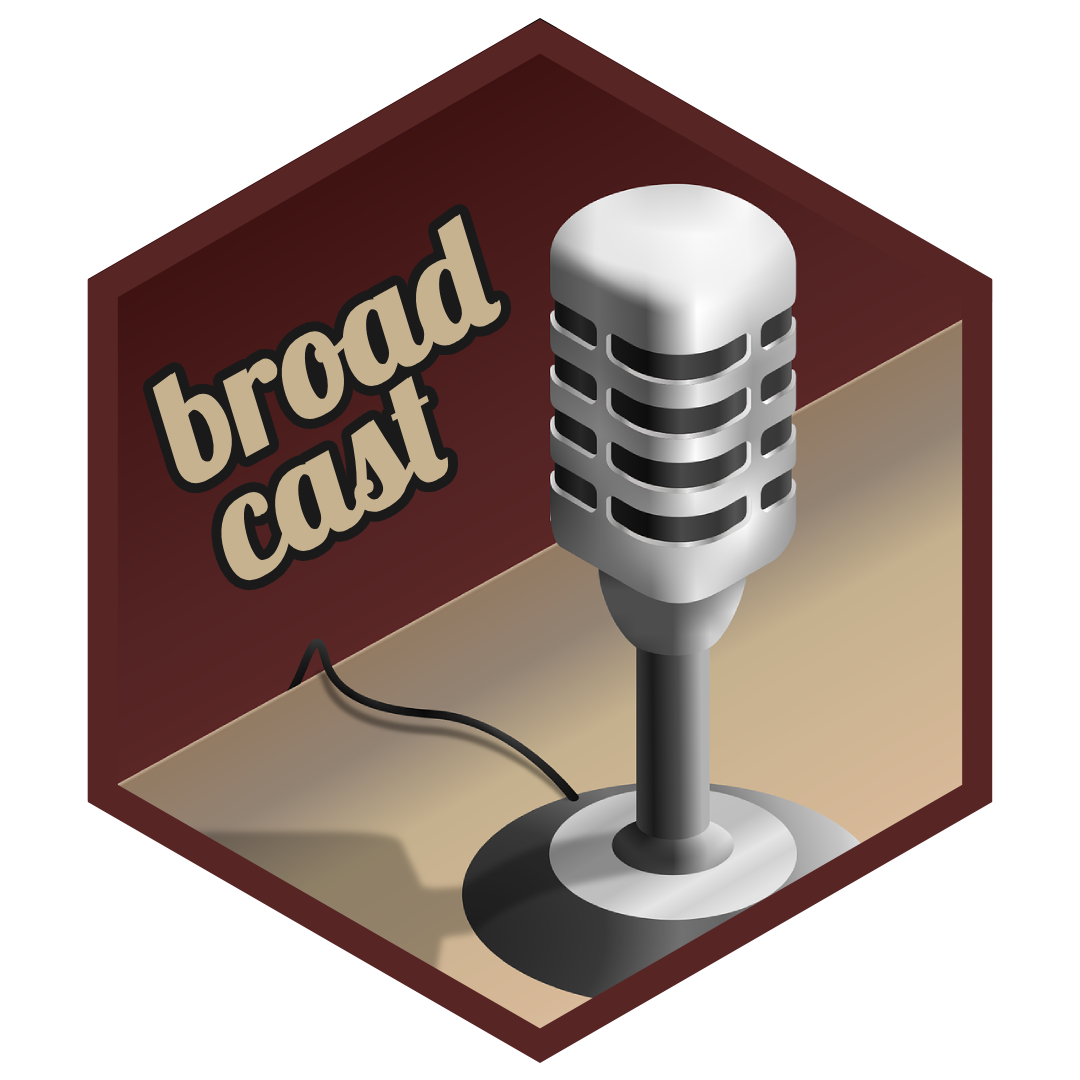
<style>
.page{position:relative;width:1080px;height:1080px;background:#ffffff}
.page>*{position:absolute;margin:0}
.t1{font:156px "Lobster-Regular";color:#c7b28f;font-weight:bold}
</style>
<div class="page">
<p class="t1" style="left:152px;top:214px;width:351px;height:368px;rotate:-29deg">broad<br>cast</p>
</div>
